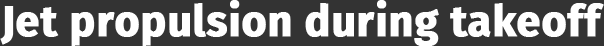
<style>
.page{position:relative;width:604px;height:46px;background:#333333}
.page>*{position:absolute;margin:0}
.t1{font:42.7px "FiraSans-Bold";color:#ffffff;font-weight:bold}
</style>
<div class="page">
<p class="t1" style="left:0px;top:0px;width:604px;height:47px">Jet propulsion during takeoff</p>
</div>
